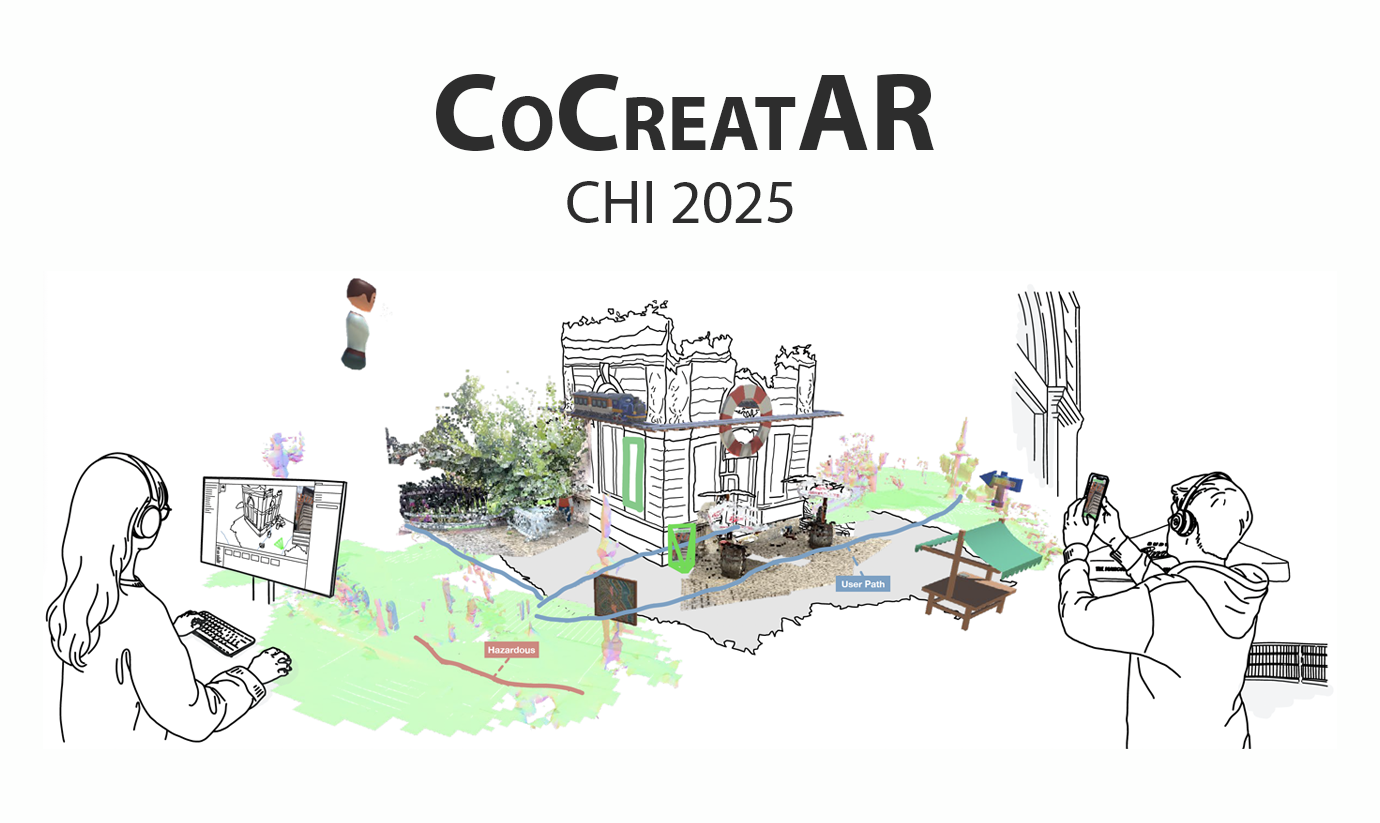
<style>
.page{position:relative;width:1380px;height:823px;background:#fdfefd}
.page>*{position:absolute;margin:0}
.t1{font:111.5px "MyriadPro-Bold";color:#2d2d2d;font-variant:small-caps}
.t2{font:61.9px "MyriadPro-Regular";color:#2d2d2d;font-variant:small-caps}
</style>
<div class="page">
<p class="t1" style="left:436px;top:73px;width:498px;height:78px">CoCreatAR</p>
<p class="t2" style="left:567px;top:181px;width:226px;height:42px">CHI 2025</p>
</div>
